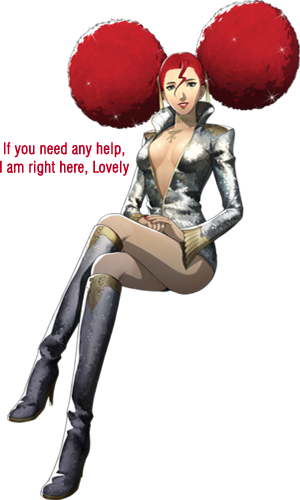
<style>
.page{position:relative;width:300px;height:500px;background:#ffffff}
.page>*{position:absolute;margin:0}
.t1{font:15.4px "Swiss721BT-LightCondensed";color:#bf0020;font-weight:bold}
</style>
<div class="page">
<p class="t1" style="left:0px;top:142px;width:129px;height:34px;text-align:center">If you need any help, <br>I am right here, Lovely</p>
</div>
